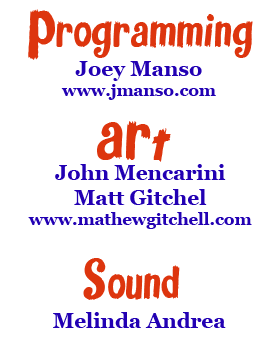
<style>
.page{position:relative;width:280px;height:360px;background:#ffffff}
.page>*{position:absolute;margin:0}
.t1{font:91.7px "FantasticFont";color:#dd350e}
.t2{font:16.7px "Georgia-Bold";color:#2200b4}
.t3{font:20.8px "Georgia-Bold";color:#2200b4}
</style>
<div class="page">
<p class="t1" style="left:28px;top:9px;width:225px;height:51px">Programming</p>
<p class="t2" style="left:61px;top:61px;width:155px;height:39px;text-align:center"><span class="t3">Joey Manso<br></span>www.jmanso.com</p>
<p class="t1" style="left:97px;top:121px;width:74px;height:41px">ARt</p>
<p class="t3" style="left:28px;top:164px;width:224px;height:65px;text-align:center">John Mencarini<br>Matt Gitchel<br><span class="t2">www.mathewgitchell.com</span></p>
<p class="t1" style="left:83px;top:258px;width:97px;height:42px">Sound</p>
<p class="t3" style="left:53px;top:312px;width:173px;height:16px">Melinda Andrea</p>
</div>
